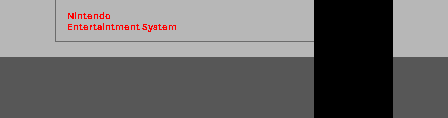
<style>
.page{position:relative;width:448px;height:118px;background:#575757}
.page>*{position:absolute;margin:0}
.t1{font:9px "Montserrat-Bold";color:#ff0000}
</style>
<div class="page">
<p class="t1" style="left:68px;top:12px;width:108px;height:20px">Nintendo <br>Entertaintment System</p>
</div>
